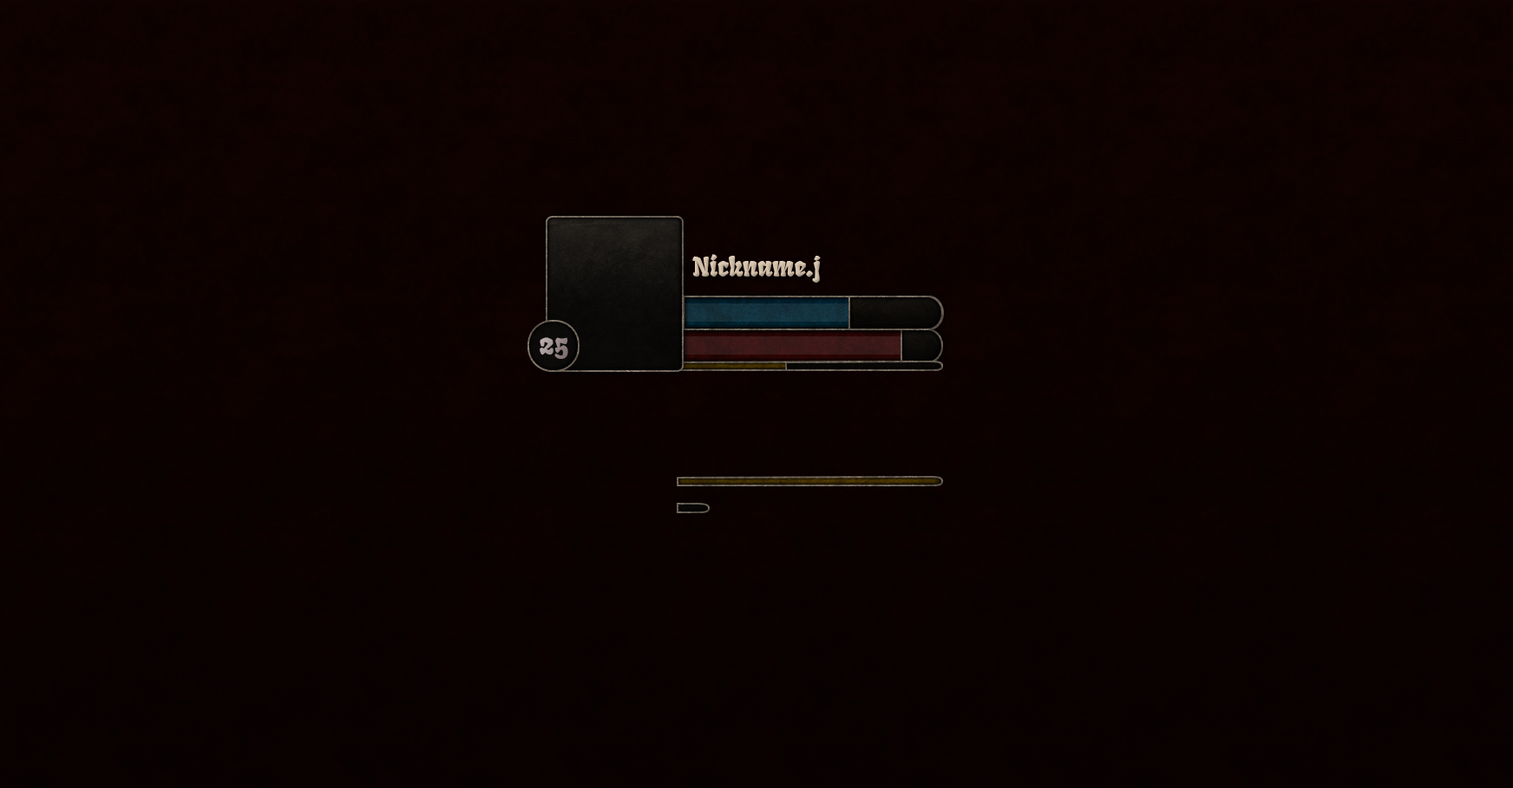
<style>
.page{position:relative;width:1513px;height:788px}
.page>*{position:absolute;margin:0}
.t1{font:26px "Fruktur-Regular";color:#d5c1aa}
.t2{font:28.5px "Fruktur-Regular"}
</style>
<div class="page">
<p class="t1" style="left:692px;top:254px;width:128px;height:29px">Nickname.j</p>
<p class="t2" style="left:539px;top:337px;width:29px;height:22px">25</p>
</div>
